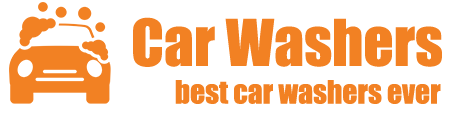
<style>
.page{position:relative;width:454px;height:131px;background:#ffffff}
.page>*{position:absolute;margin:0}
.t1{font:59.5px "Impact";color:#f28123}
.t2{font:29.5px "Impact";color:#f28123}
</style>
<div class="page">
<p class="t1" style="left:133px;top:17px;width:309px;height:50px">Car Washers</p>
<p class="t2" style="left:175px;top:80px;width:266px;height:24px">best car washers ever</p>
</div>
